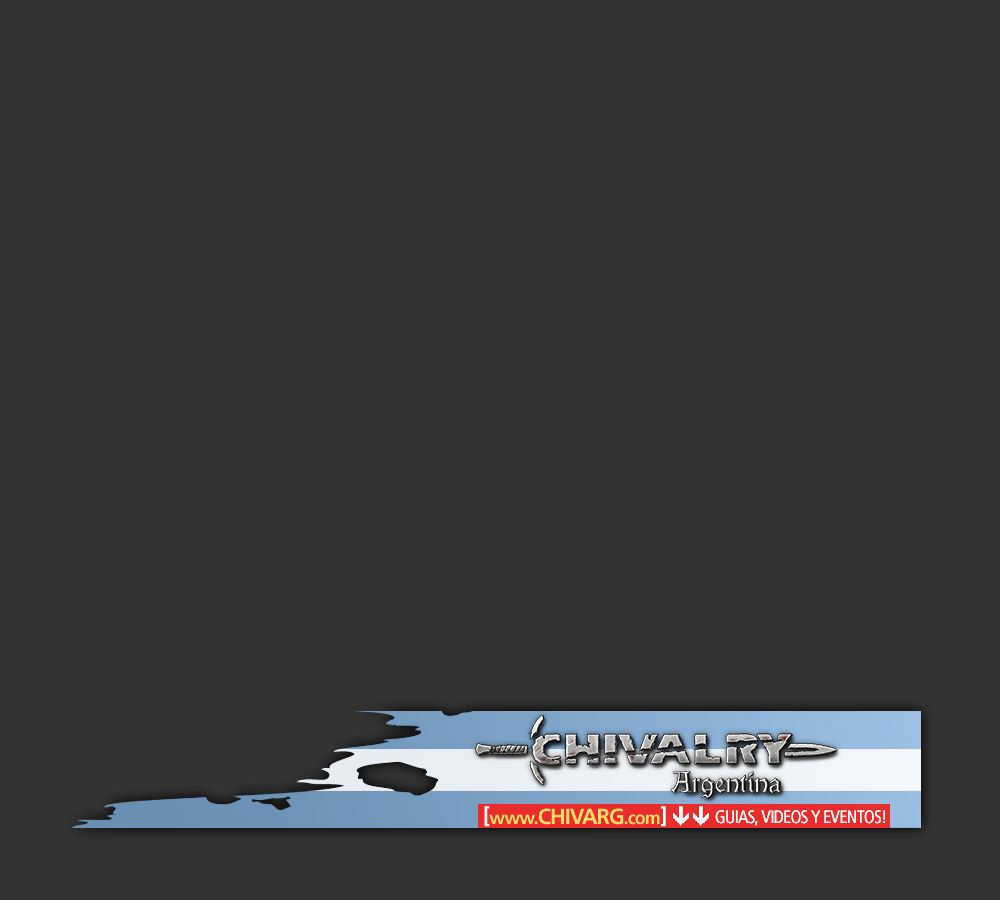
<style>
.page{position:relative;width:1000px;height:900px;background:#333333}
.page>*{position:absolute;margin:0}
.t1{font:22px "FrutigerLTStd-Bold";letter-spacing:-0.05em;color:#ffdd66}
.t2{font:22px "FrutigerLTStd-Bold";letter-spacing:-0.05em;color:#ffffff}
.t3{font:18px "FrutigerLTStd-Bold";letter-spacing:-0.05em;color:#ffdd66}
.t4{font:18px "FrutigerLTStd-Cn";letter-spacing:-0.05em;color:#ffffff}
</style>
<div class="page">
<p class="t1" style="left:484px;top:806px;width:182px;height:21px"><span class="t2">[</span><span class="t3">www.</span>CHIVARG<span class="t3">.com</span><span class="t2">]</span></p>
<p class="t4" style="left:715px;top:810px;width:170px;height:16px">GUIAS, VIDEOS Y EVENTOS!</p>
<p class="t4" style="left:715px;top:810px;width:170px;height:16px">GUIAS, VIDEOS Y EVENTOS!</p>
</div>
